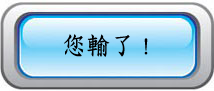
<style>
.page{position:relative;width:214px;height:91px}
.page>*{position:absolute;margin:0}
.t1{font:24px "DFFangSongStd-W6";color:#000000}
</style>
<div class="page">
<p class="t1" style="left:64px;top:34px;width:84px;height:23px">您輸了！</p>
</div>
